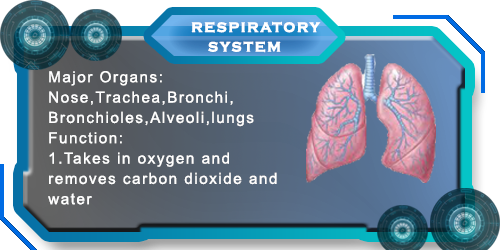
<style>
.page{position:relative;width:500px;height:250px}
.page>*{position:absolute;margin:0}
.t1{font:14px "CopperplateGothic-Bold";letter-spacing:0.1em;color:#ffffff;font-weight:bold}
.t2{font:15.2px/20.3px "ArialMT";letter-spacing:0.1em;color:#ffffff}
</style>
<div class="page">
<p class="t1" style="left:191px;top:21px;width:130px;height:12px">RESPIRATORY</p>
<p class="t1" style="left:208px;top:41px;width:73px;height:12px">SYSTEM</p>
<p class="t2" style="left:48px;top:71px;width:229px;height:134px">Major Organs:<br>Nose,Trachea,Bronchi,<br>Bronchioles,Alveoli,lungs <br>Function:<br>1.Takes in oxygen and <br>removes carbon dioxide and water</p>
</div>
